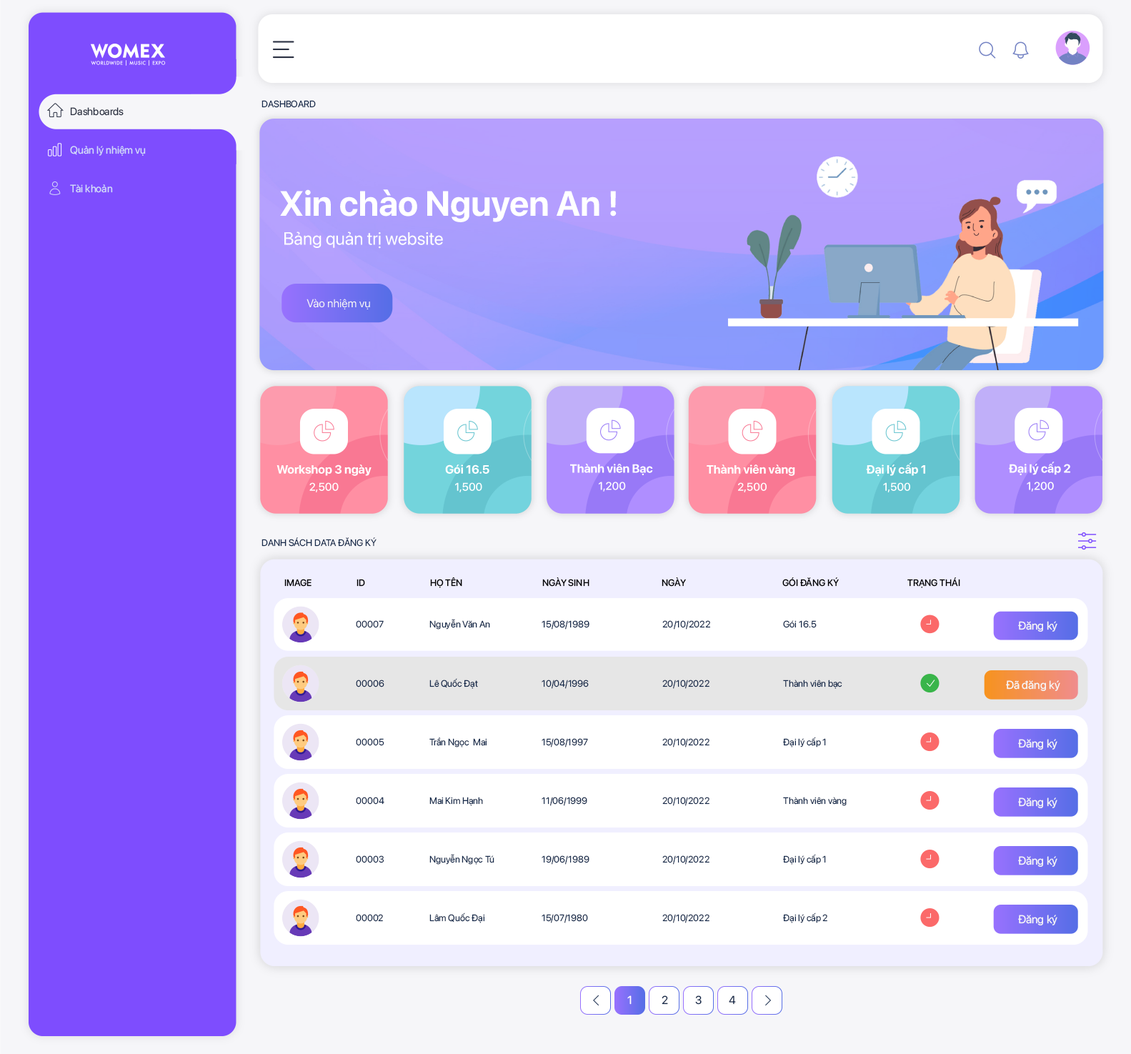
<style>
.page{position:relative;width:1131px;height:1054px;background:#ffffff}
.page>*{position:absolute;margin:0}
.t1{font:9.3px "SFProDisplay-Regular";color:#172b4c}
.t2{font:10.5px "SFProDisplay-Regular";color:#2a3042}
.t3{font:10.5px "SFProDisplay-Regular";color:#d4dbf9}
.t4{font:9.3px "SFProDisplay-Medium";color:#000000}
.t5{font:11.2px "SFProDisplay-Regular";color:#f6f6f6}
.t6{font:11.4px "SFProDisplay-Regular";color:#f6f6f6}
.t7{font:11.4px "SFProDisplay-Regular";color:#ffffff}
.t8{font:11.4px "SFProDisplay-Regular";color:#172b4c}
</style>
<div class="page">
<p class="t1" style="left:262px;top:100px;width:54px;height:8px">DASHBOARD</p>
<p class="t2" style="left:70px;top:107px;width:54px;height:9px">Dashboards</p>
<p class="t3" style="left:70px;top:146px;width:76px;height:10px">Quản lý nhiệm vụ</p>
<p class="t3" style="left:70px;top:184px;width:43px;height:9px">Tài khoản</p>
<p class="t1" style="left:262px;top:537px;width:115px;height:10px">DANH SÁCH DATA ĐĂNG KÝ</p>
<p class="t4" style="left:284px;top:579px;width:28px;height:8px">IMAGE</p>
<p class="t4" style="left:357px;top:579px;width:8px;height:8px">ID</p>
<p class="t4" style="left:430px;top:577px;width:32px;height:11px">HỌ TÊN</p>
<p class="t4" style="left:542px;top:577px;width:48px;height:10px">NGÀY SINH</p>
<p class="t4" style="left:662px;top:577px;width:24px;height:10px">NGÀY</p>
<p class="t4" style="left:783px;top:577px;width:56px;height:10px">GÓI ĐĂNG KÝ</p>
<p class="t4" style="left:908px;top:577px;width:52px;height:11px">TRẠNG THÁI</p>
<p class="t1" style="left:356px;top:620px;width:28px;height:8px">00007</p>
<p class="t1" style="left:429px;top:619px;width:61px;height:11px">Nguyễn Văn An</p>
<p class="t1" style="left:542px;top:620px;width:48px;height:10px">15/08/1989</p>
<p class="t1" style="left:662px;top:620px;width:48px;height:10px">20/10/2022</p>
<p class="t1" style="left:783px;top:620px;width:34px;height:8px">Gói 16.5</p>
<p class="t5" style="left:1018px;top:621px;width:40px;height:11px">Đăng ký</p>
<p class="t1" style="left:356px;top:680px;width:28px;height:7px">00006</p>
<p class="t1" style="left:429px;top:678px;width:49px;height:11px">Lê Quốc Đạt</p>
<p class="t1" style="left:542px;top:680px;width:47px;height:9px">10/04/1996</p>
<p class="t1" style="left:662px;top:680px;width:48px;height:9px">20/10/2022</p>
<p class="t1" style="left:783px;top:680px;width:60px;height:9px">Thành viên bạc</p>
<p class="t6" style="left:1006px;top:680px;width:55px;height:11px">Đã đăng ký</p>
<p class="t1" style="left:429px;top:737px;width:58px;height:11px">Trần Ngọc  Mai</p>
<p class="t1" style="left:783px;top:737px;width:43px;height:11px">Đại lý cấp 1</p>
<p class="t1" style="left:356px;top:738px;width:28px;height:8px">00005</p>
<p class="t1" style="left:542px;top:738px;width:46px;height:10px">15/08/1997</p>
<p class="t1" style="left:662px;top:738px;width:48px;height:10px">20/10/2022</p>
<p class="t6" style="left:1018px;top:739px;width:40px;height:11px">Đăng ký</p>
<p class="t1" style="left:356px;top:797px;width:28px;height:8px">00004</p>
<p class="t1" style="left:429px;top:797px;width:54px;height:9px">Mai Kim Hạnh</p>
<p class="t1" style="left:542px;top:797px;width:45px;height:9px">11/06/1999</p>
<p class="t1" style="left:662px;top:797px;width:48px;height:9px">20/10/2022</p>
<p class="t1" style="left:783px;top:797px;width:64px;height:9px">Thành viên vàng</p>
<p class="t6" style="left:1018px;top:798px;width:40px;height:10px">Đăng ký</p>
<p class="t1" style="left:356px;top:855px;width:28px;height:8px">00003</p>
<p class="t1" style="left:429px;top:854px;width:66px;height:11px">Nguyễn Ngọc Tú</p>
<p class="t1" style="left:542px;top:855px;width:48px;height:10px">19/06/1989</p>
<p class="t1" style="left:662px;top:855px;width:48px;height:10px">20/10/2022</p>
<p class="t1" style="left:783px;top:854px;width:43px;height:11px">Đại lý cấp 1</p>
<p class="t6" style="left:1018px;top:856px;width:40px;height:11px">Đăng ký</p>
<p class="t1" style="left:356px;top:914px;width:27px;height:8px">00002</p>
<p class="t1" style="left:429px;top:913px;width:56px;height:10px">Lâm Quốc Đại</p>
<p class="t1" style="left:542px;top:914px;width:46px;height:9px">15/07/1980</p>
<p class="t1" style="left:662px;top:914px;width:48px;height:9px">20/10/2022</p>
<p class="t1" style="left:783px;top:913px;width:45px;height:10px">Đại lý cấp 2</p>
<p class="t6" style="left:1018px;top:915px;width:40px;height:10px">Đăng ký</p>
<p class="t7" style="left:627px;top:995px;width:5px;height:10px">1</p>
<p class="t8" style="left:662px;top:995px;width:6px;height:10px">2</p>
<p class="t8" style="left:695px;top:995px;width:7px;height:10px">3</p>
<p class="t8" style="left:729px;top:995px;width:7px;height:10px">4</p>
</div>
